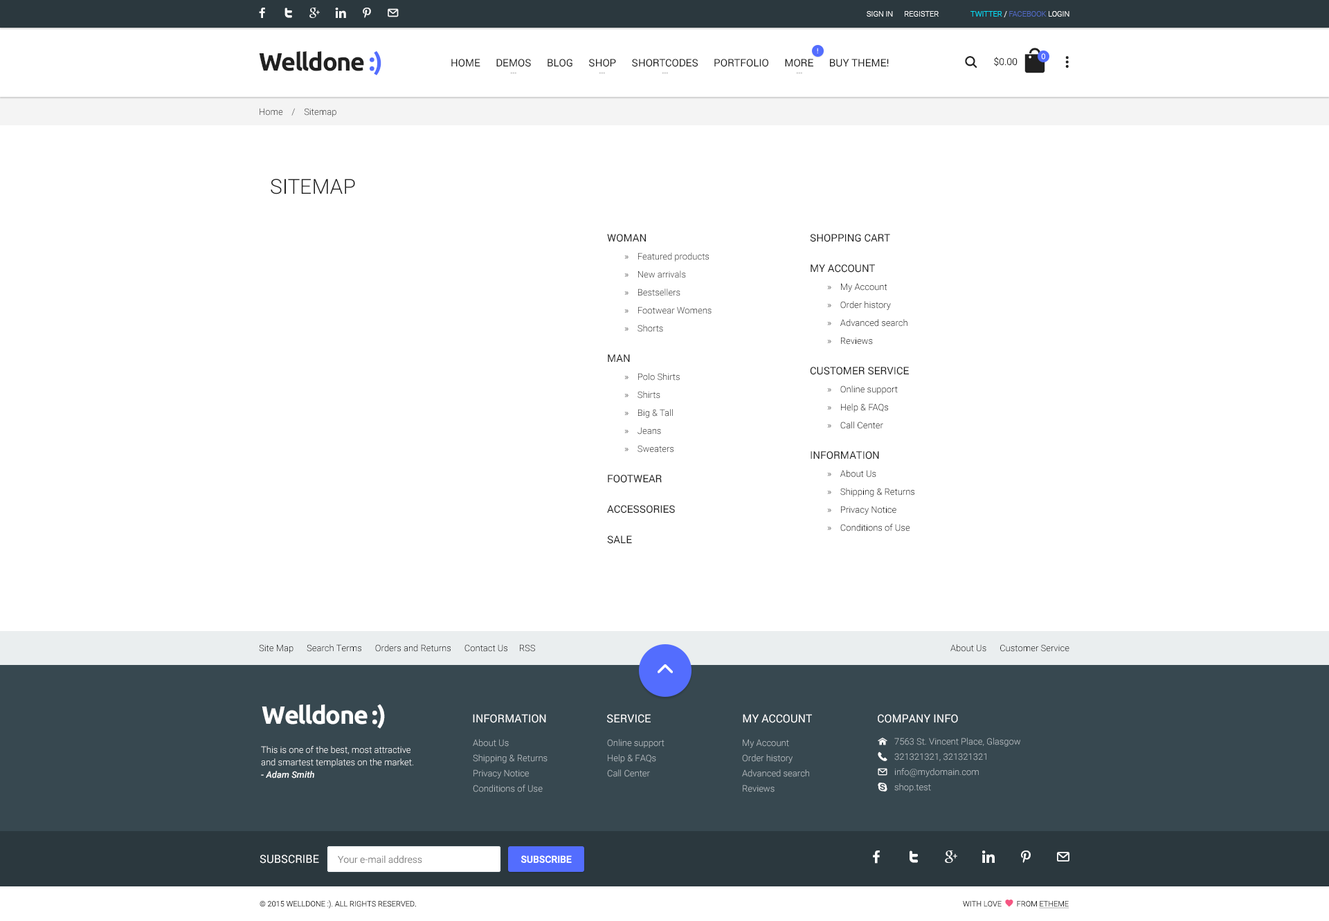
<style>
.page{position:relative;width:1329px;height:921px;background:#ffffff}
.page>*{position:absolute;margin:0}
.t1{font:7.6px "Roboto-Light";color:#ffffff}
.t2{font:7.6px "Roboto-Light";color:#526ac4}
.t3{font:7.6px "Roboto-Light";color:#00e4ff}
.t4{font:24.9px "Ubuntu-Bold";letter-spacing:-0.04em;color:#212121}
.t5{font:24.9px "Ubuntu-Bold";letter-spacing:-0.04em;color:#536dfe}
.t6{font:6.9px "Roboto-Regular"}
.t7{font:10.4px "Roboto-Regular";color:#212121}
.t8{font:9.7px "Roboto-Light";color:#212121}
.t9{font:9px "Roboto-Light";color:#2b2b2b}
.t10{font:20.8px "Roboto-Light";color:#212121;text-transform:uppercase}
.t11{font:10.4px/30.5px "Roboto-Regular";color:#212121;text-transform:uppercase}
.t12{font:10.4px/23.5px "Roboto-Regular";color:#212121;text-transform:uppercase}
.t13{font:9px/18px "Roboto-Light";color:#000000}
.t14{font:9px/18px "Roboto-Light";color:#212121}
.t15{font:9px "Roboto-Light";color:#000000}
.t16{font:24.9px "Ubuntu-Bold";letter-spacing:-0.04em;color:#ffffff}
.t17{font:11.1px "Roboto-Regular";color:#ffffff;text-transform:uppercase}
.t18{font:9px/12.5px "Roboto-Light";color:#ffffff}
.t19{font:9px/12.5px "Roboto-MediumItalic";color:#ffffff}
.t20{font:9px/15.2px "Roboto-Light";color:#bbc2c6}
.t21{font:9.7px "Roboto-Light";color:#848484}
.t22{font:9.7px "Roboto-Medium";color:#ffffff;text-transform:uppercase}
.t23{font:7.6px "Roboto-Light";color:#2b2b2b;text-transform:uppercase}
</style>
<div class="page">
<p class="t1" style="left:867px;top:11px;width:72px;height:6px">SIGN IN      REGISTER</p>
<p class="t2" style="left:971px;top:11px;width:99px;height:6px"><span class="t3">TWITTER </span><span class="t1">/ </span>FACEBOOK <span class="t1">LOGIN</span></p>
<p class="t4" style="left:259px;top:51px;width:122px;height:24px">Welldone <span class="t5">:)</span></p>
<p class="t6" style="left:817px;top:48px;width:1px;height:5px">!</p>
<p class="t1" style="left:1041px;top:53px;width:4px;height:7px">0</p>
<p class="t7" style="left:451px;top:59px;width:438px;height:8px">HOME      DEMOS      BLOG      SHOP      SHORTCODES      PORTFOLIO      MORE      BUY THEME!</p>
<p class="t8" style="left:994px;top:57px;width:24px;height:9px">$0.00</p>
<p class="t9" style="left:260px;top:108px;width:76px;height:9px">Home    /    Sitemap</p>
<p class="t10" style="left:271px;top:179px;width:84px;height:16px">sitemap</p>
<p class="t11" style="left:607px;top:234px;width:105px;height:310px"><span class="t12">Woman<br></span><span class="t13">        »    </span><span class="t14">Featured products<br></span><span class="t13">        »    </span><span class="t14">New arrivals<br></span><span class="t13">        »    </span><span class="t14">Bestsellers<br></span><span class="t13">        »    </span><span class="t14">Footwear Womens<br></span><span class="t13">        »    </span><span class="t14">Shorts<br></span>Man<br><span class="t13">        »    </span><span class="t14">Polo Shirts<br></span><span class="t13">        »    </span><span class="t14">Shirts<br></span><span class="t13">        »    </span><span class="t14">Big &amp; Tall<br></span><span class="t13">        »    </span><span class="t14">Jeans<br></span><span class="t13">        »    </span><span class="t14">Sweaters<br></span>Footwear<br>Accessories<br>Sale</p>
<p class="t13" style="left:810px;top:234px;width:105px;height:298px"><span class="t11">Shopping cart<br>My Account<br></span>        »    My Account<br>        »    Order history<br>        »    Advanced search<br>        »    Reviews<br><span class="t11">customer service<br></span>        »    Online support<br>        »    Help &amp; FAQs<br>        »    Call Center<br><span class="t11">Information<br></span>        »    About Us<br>        »    Shipping &amp; Returns<br>        »    Privacy Notice<br>        »    Conditions of Use</p>
<p class="t15" style="left:259px;top:645px;width:276px;height:9px">Site Map      Search Terms      Orders and Returns      Contact Us     RSS</p>
<p class="t15" style="left:951px;top:645px;width:119px;height:7px">About Us      Customer Service</p>
<p class="t16" style="left:262px;top:704px;width:123px;height:25px">Welldone :)</p>
<p class="t17" style="left:473px;top:714px;width:73px;height:9px">Information</p>
<p class="t17" style="left:607px;top:714px;width:44px;height:9px">service</p>
<p class="t17" style="left:743px;top:714px;width:69px;height:9px">My account</p>
<p class="t17" style="left:878px;top:714px;width:80px;height:9px">Company Info</p>
<p class="t18" style="left:261px;top:746px;width:152px;height:33px">This is one of the best, most attractive and smartest templates on the market. <br><span class="t19">- Adam Smith</span></p>
<p class="t20" style="left:473px;top:739px;width:75px;height:54px">About Us<br>Shipping &amp; Returns<br>Privacy Notice<br>Conditions of Use</p>
<p class="t20" style="left:607px;top:739px;width:58px;height:38px">Online support<br>Help &amp; FAQs<br>Call Center</p>
<p class="t20" style="left:742px;top:739px;width:67px;height:54px">My Account<br>Order history<br>Advanced search<br>Reviews</p>
<p class="t20" style="left:894px;top:738px;width:126px;height:55px">7563 St. Vincent Place, Glasgow<br>321321321, 321321321<br>info@mydomain.com<br>shop.test</p>
<p class="t17" style="left:260px;top:855px;width:59px;height:9px">Subscribe</p>
<p class="t21" style="left:338px;top:856px;width:84px;height:8px">Your e-mail address</p>
<p class="t22" style="left:521px;top:856px;width:51px;height:7px">SUBSCRIBE</p>
<p class="t23" style="left:260px;top:901px;width:156px;height:8px">© 2015 Welldone :). All Rights Reserved.</p>
</div>
